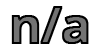
<style>
.page{position:relative;width:100px;height:50px;background:#ffffff}
.page>*{position:absolute;margin:0}
.t1{font:12px "NotoSans-Bold";letter-spacing:-0.01em;color:#737373}
</style>
<div class="page">
<p class="t1" style="left:12px;top:7px;width:76px;height:36px;text-align:center">n/a</p>
</div>
